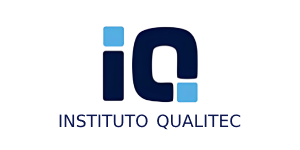
<style>
.page{position:relative;width:300px;height:150px;background:#ffffff}
.page>*{position:absolute;margin:0}
.t1{font:17px "DejaVuSans";color:#0b1651}
</style>
<div class="page">
<p class="t1" style="left:59px;top:114px;width:182px;height:16px">INSTITUTO QUALITEC</p>
</div>
